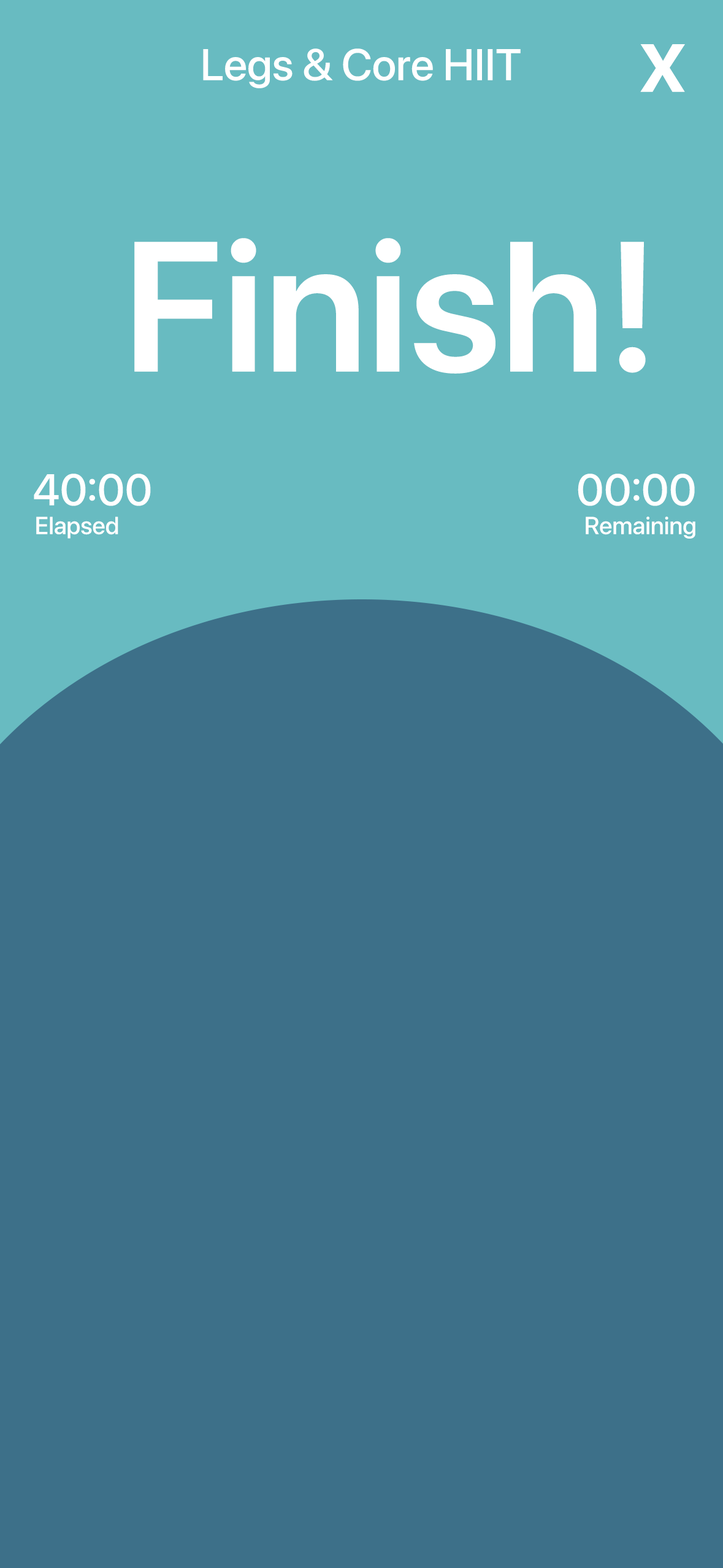
<style>
.page{position:relative;width:723px;height:1568px;background:#3d7089}
.page>*{position:absolute;margin:0}
.t1{font:44.2px "SFPro-Medium";color:#ffffff}
.t2{font:92px "SFPro-Semibold";color:#ffffff}
.t3{font:184px "SFPro-Semibold";color:#ffffff}
.t4{font:24.5px "SFPro-Medium";color:#ffffff}
</style>
<div class="page">
<p class="t1" style="left:203px;top:48px;width:318px;height:40px">Legs &amp; Core HIIT</p>
<p class="t2" style="left:640px;top:44px;width:45px;height:48px">x</p>
<p class="t3" style="left:134px;top:238px;width:512px;height:136px">Finish!</p>
<p class="t1" style="left:34px;top:474px;width:117px;height:32px">40:00</p>
<p class="t1" style="left:578px;top:474px;width:117px;height:32px">00:00</p>
<p class="t4" style="left:36px;top:517px;width:82px;height:22px">Elapsed</p>
<p class="t4" style="left:586px;top:517px;width:110px;height:22px">Remaining</p>
</div>
